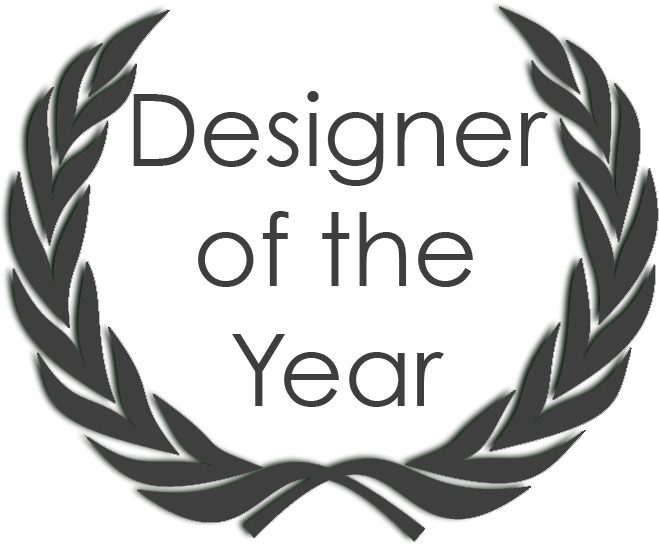
<style>
.page{position:relative;width:659px;height:544px;background:#ffffff}
.page>*{position:absolute;margin:0}
.t1{font:100px "CenturyGothic";color:#3e3e3e}
</style>
<div class="page">
<p class="t1" style="left:133px;top:91px;width:415px;height:316px;text-align:center">Designer<br>of the<br>Year</p>
</div>
